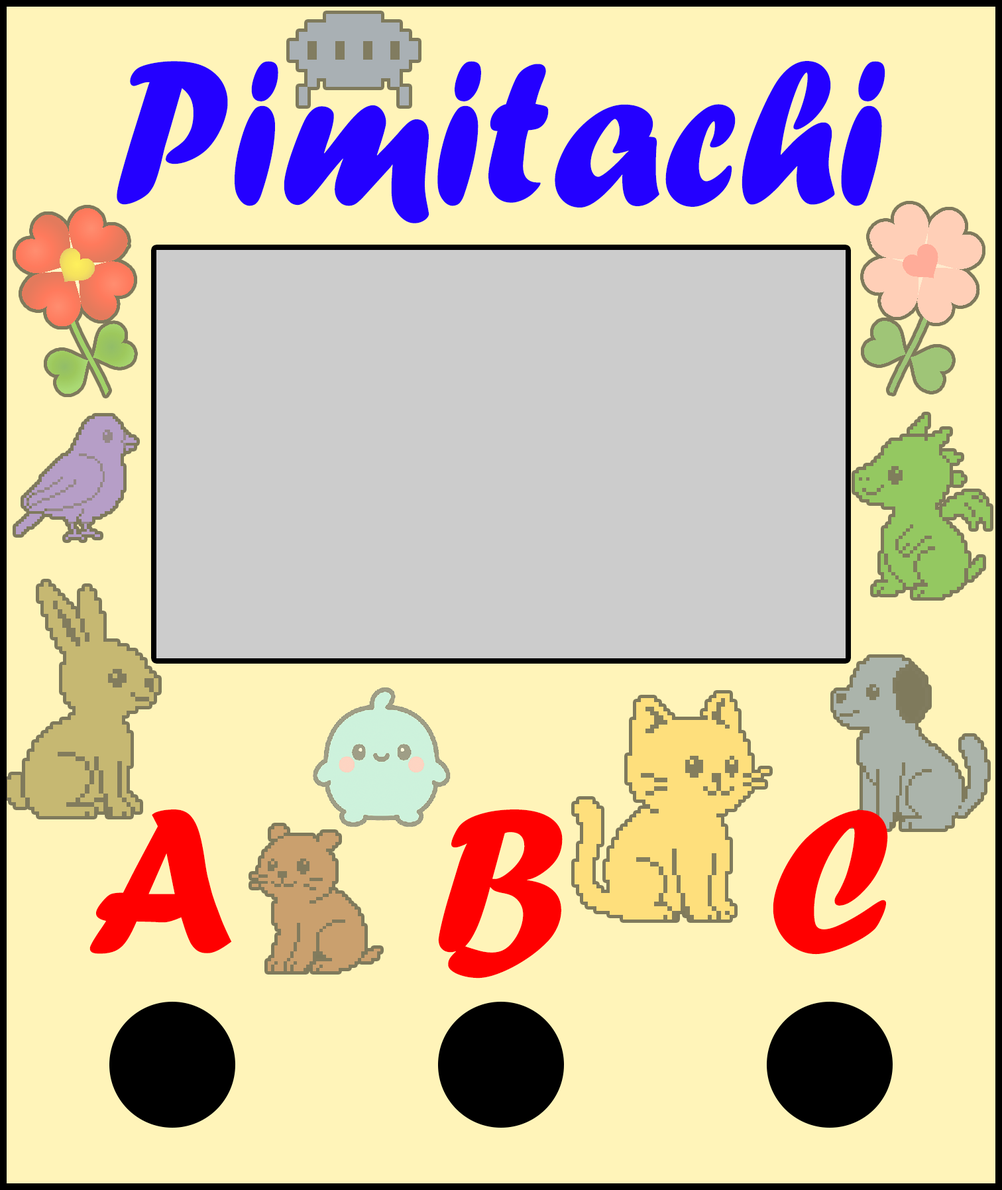
<style>
.page{position:relative;width:1002px;height:1190px;background:#fff4b9}
.page>*{position:absolute;margin:0}
.t1{font:212.8px "ForteMT";color:#2400ff;scale:0.93 1}
.t2{font:212.8px "ForteMT";color:#ff0000;scale:0.93 1}
</style>
<div class="page">
<p class="t1" style="left:117px;top:61px;width:769px;height:162px">Pimitachi</p>
<p class="t2" style="left:89px;top:809px;width:143px;height:145px">A</p>
<p class="t2" style="left:438px;top:809px;width:125px;height:169px">B</p>
<p class="t2" style="left:773px;top:810px;width:115px;height:144px">C</p>
</div>
